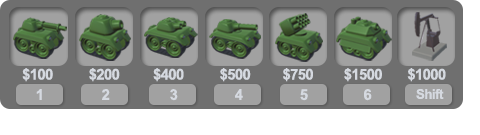
<style>
.page{position:relative;width:480px;height:135px;background:#6f6f6f}
.page>*{position:absolute;margin:0}
.t1{font:14.9px "Arial-BoldMT";letter-spacing:-0.04em;color:#d5d9e0}
.t2{font:13.4px "Arial-BoldMT";letter-spacing:-0.04em;color:#d5d9e0}
</style>
<div class="page">
<p class="t1" style="left:22px;top:68px;width:31px;height:14px">$100</p>
<p class="t1" style="left:89px;top:68px;width:31px;height:14px">$200</p>
<p class="t1" style="left:153px;top:68px;width:31px;height:14px">$400</p>
<p class="t1" style="left:220px;top:68px;width:31px;height:14px">$500</p>
<p class="t1" style="left:283px;top:68px;width:30px;height:14px">$750</p>
<p class="t1" style="left:344px;top:68px;width:38px;height:14px">$1500</p>
<p class="t1" style="left:407px;top:68px;width:39px;height:14px">$1000</p>
<p class="t1" style="left:36px;top:89px;width:6px;height:11px">1</p>
<p class="t1" style="left:102px;top:89px;width:8px;height:11px">2</p>
<p class="t1" style="left:170px;top:89px;width:8px;height:12px">3</p>
<p class="t1" style="left:235px;top:89px;width:8px;height:11px">4</p>
<p class="t1" style="left:300px;top:89px;width:8px;height:12px">5</p>
<p class="t1" style="left:364px;top:89px;width:8px;height:12px">6</p>
<p class="t2" style="left:416px;top:89px;width:28px;height:10px">Shift</p>
</div>
